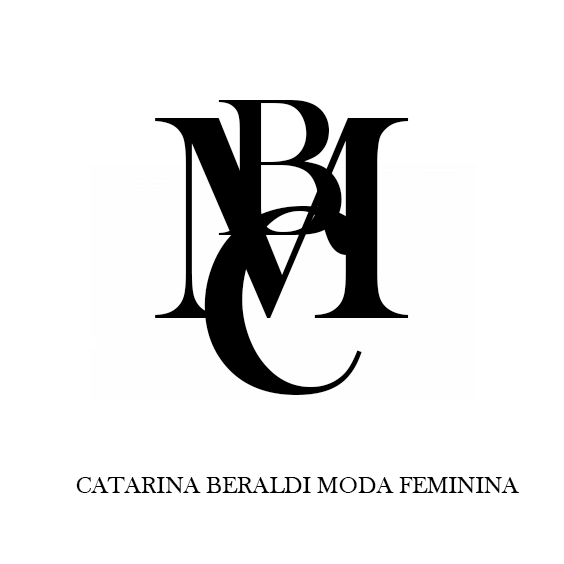
<style>
.page{position:relative;width:564px;height:564px;background:#ffffff}
.page>*{position:absolute;margin:0}
.t1{font:203.1px "BaskOldFace";color:#000000}
.t2{font:300px "BaskOldFace";color:#000000}
.t3{font:437.2px "BaskOldFace";color:#000000}
.t4{font:24px "BaskOldFace";color:#000000}
</style>
<div class="page">
<p class="t1" style="left:218px;top:100px;width:124px;height:135px">B</p>
<p class="t2" style="left:155px;top:118px;width:254px;height:200px">M</p>
<p class="t3" style="left:204px;top:206px;width:159px;height:189px">c</p>
<p class="t4" style="left:76px;top:477px;width:443px;height:16px">CATARINA BERALDI MODA FEMININA</p>
</div>
